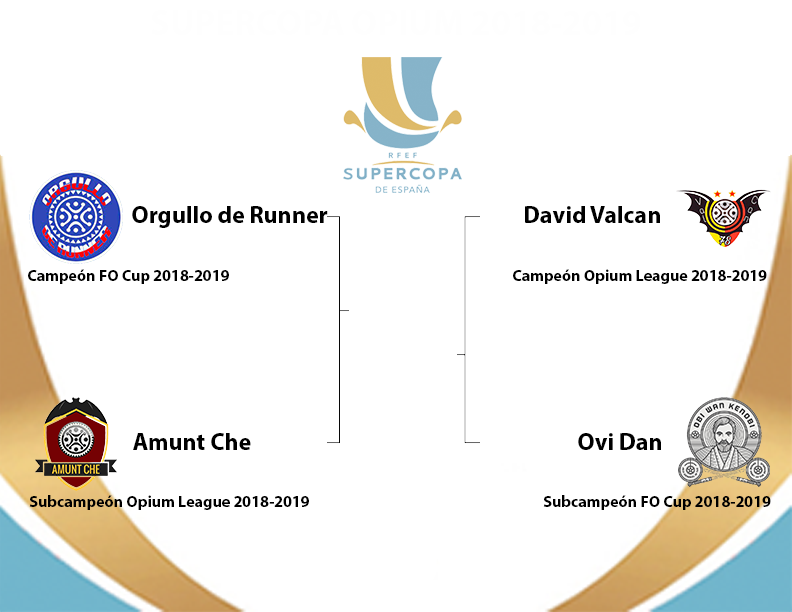
<style>
.page{position:relative;width:792px;height:612px;background:#ffffff}
.page>*{position:absolute;margin:0}
.t1{font:24px "MyriadPro-Bold";color:#000000}
.t2{font:16px "MyriadPro-Bold";color:#000000}
</style>
<div class="page">
<p class="t1" style="left:132px;top:206px;width:196px;height:22px">Orgullo de Runner</p>
<p class="t1" style="left:525px;top:206px;width:135px;height:17px">David Valcan</p>
<p class="t2" style="left:28px;top:269px;width:201px;height:15px">Campeón FO Cup 2018-2019</p>
<p class="t2" style="left:513px;top:269px;width:254px;height:15px">Campeón Opium League 2018-2019</p>
<p class="t1" style="left:133px;top:433px;width:118px;height:17px">Amunt Che</p>
<p class="t1" style="left:578px;top:433px;width:83px;height:17px">Ovi Dan</p>
<p class="t2" style="left:29px;top:495px;width:280px;height:15px">Subcampeón Opium League 2018-2019</p>
<p class="t2" style="left:543px;top:495px;width:228px;height:15px">Subcampeón FO Cup 2018-2019</p>
</div>
